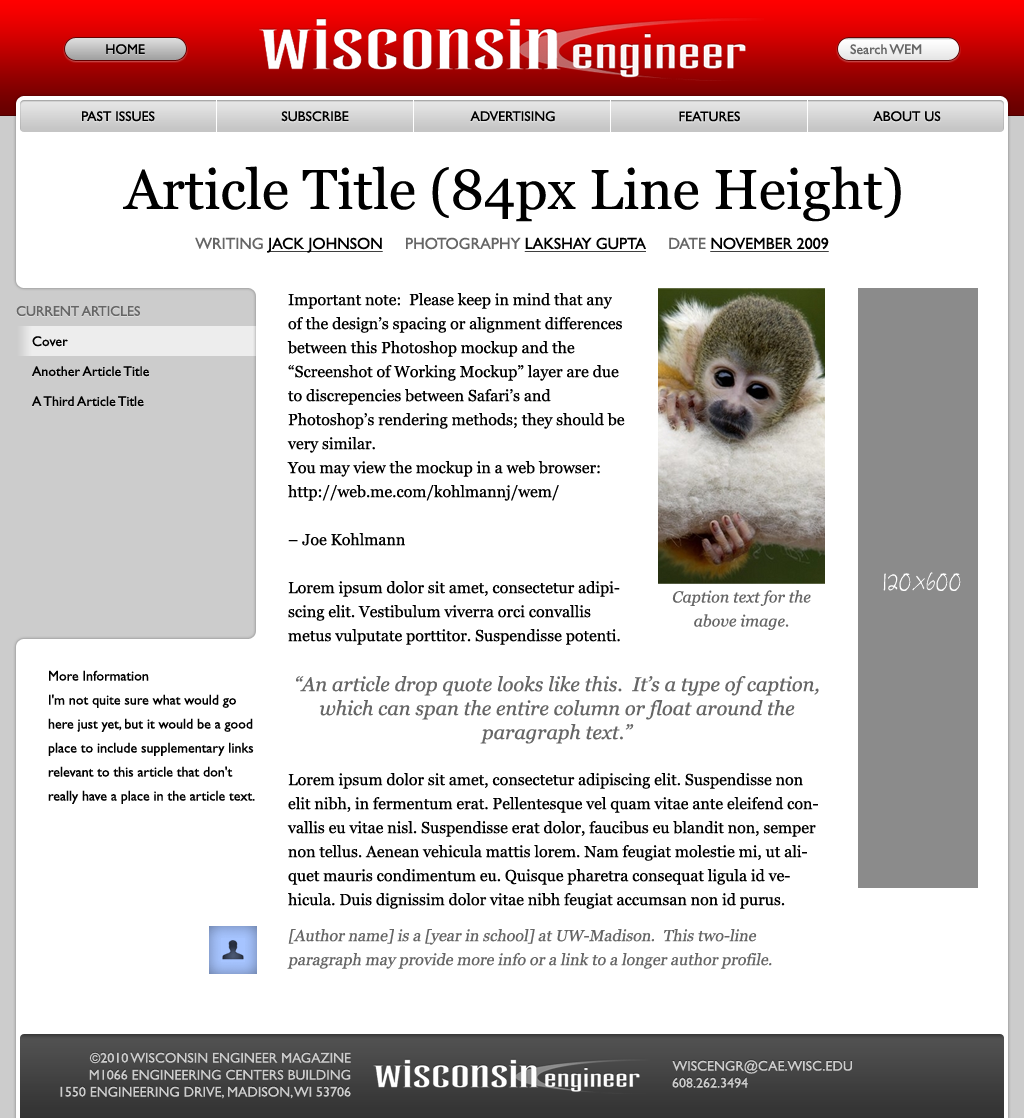
<style>
.page{position:relative;width:1024px;height:1118px;background:#ffffff}
.page>*{position:absolute;margin:0}
.t1{font:14px "GillSans";color:#000000;text-transform:uppercase}
.t2{font:14px "GillSans";color:#666666}
.t3{font:56px "Georgia";color:#000000}
.t4{font:16px "GillSans";color:#000000;text-transform:uppercase;text-decoration:underline}
.t5{font:16px "GillSans";color:#666666;text-transform:uppercase}
.t6{font:16px/24px "Georgia";color:#000000}
.t7{font:14px "GillSans";color:#666666;text-transform:uppercase}
.t8{font:14px "GillSans";color:#000000}
.t9{font:16px/24px "Georgia-Italic";color:#666666}
.t10{font:14px/24px "GillSans";color:#000000}
.t11{font:20px/24px "Georgia-Italic";color:#666666}
.t12{font:16px/24px "Georgia";color:#666666;font-style:italic}
.t13{font:14px/17px "GillSans";color:#cccccc;text-transform:uppercase}
.t14{font:14px "GillSans";color:#cccccc;text-transform:uppercase}
</style>
<div class="page">
<p class="t1" style="left:106px;top:44px;width:39px;height:11px">HOME</p>
<p class="t2" style="left:850px;top:44px;width:72px;height:11px">Search WEM</p>
<p class="t1" style="left:82px;top:111px;width:73px;height:11px">Past Issues</p>
<p class="t1" style="left:281px;top:111px;width:68px;height:11px">Subscribe</p>
<p class="t1" style="left:470px;top:111px;width:85px;height:11px">Advertising</p>
<p class="t1" style="left:679px;top:111px;width:61px;height:11px">Features</p>
<p class="t1" style="left:873px;top:111px;width:68px;height:11px">About Us</p>
<p class="t3" style="left:123px;top:166px;width:778px;height:56px">Article Title (84px Line Height)</p>
<p class="t4" style="left:195px;top:237px;width:634px;height:16px"><span class="t5">Writing </span>Jack Johnson     <span class="t5">Photography </span>Lakshay Gupta<span class="t5">     Date </span>November 2009</p>
<p class="t6" style="left:287px;top:293px;width:338px;height:352px">Important note:  Please keep in mind that any of the design’s spacing or alignment differences between this Photoshop mockup and the “Screenshot of Working Mockup” layer are due to discrepencies between Safari’s and Photoshop’s rendering methods; they should be very similar.<br>You may view the mockup in a web browser:<br>http://web.me.com/kohlmannj/wem/<br><br>– Joe Kohlmann<br><br>Lorem ipsum dolor sit amet, consectetur adipiscing elit. Vestibulum viverra orci convallis metus vulputate porttitor. Suspendisse potenti.</p>
<p class="t7" style="left:16px;top:306px;width:124px;height:10px">Current Articles</p>
<p class="t8" style="left:32px;top:336px;width:36px;height:11px">Cover</p>
<p class="t8" style="left:32px;top:366px;width:117px;height:11px">Another Article Title</p>
<p class="t8" style="left:32px;top:396px;width:112px;height:11px">A Third Article Title</p>
<p class="t9" style="left:672px;top:590px;width:139px;height:40px;text-align:center">Caption text for the above image.</p>
<p class="t10" style="left:48px;top:670px;width:207px;height:134px">More Information<br>I'm not quite sure what would go here just yet, but it would be a good place to include supplementary links relevant to this article that don't really have a place in the article text.</p>
<p class="t11" style="left:296px;top:676px;width:523px;height:68px;text-align:center">“An article drop quote looks like this.  It’s a type of caption, which can span the entire column or float around the paragraph text.”</p>
<p class="t6" style="left:287px;top:773px;width:531px;height:136px">Lorem ipsum dolor sit amet, consectetur adipiscing elit. Suspendisse non elit nibh, in fermentum erat. Pellentesque vel quam vitae ante eleifend convallis eu vitae nisl. Suspendisse erat dolor, faucibus eu blandit non, semper non tellus. Aenean vehicula mattis lorem. Nam feugiat molestie mi, ut aliquet mauris condimentum eu. Quisque pharetra consequat ligula id vehicula. Duis dignissim dolor vitae nibh feugiat accumsan non id purus.</p>
<p class="t12" style="left:287px;top:929px;width:485px;height:40px">[Author name] is a [year in school] at UW-Madison.  This two-line paragraph may provide more info or a link to a longer author profile.</p>
<p class="t13" style="left:60px;top:1052px;width:291px;height:47px;text-align:right">©2010 Wisconsin Engineer Magazine<br>M1066 Engineering Centers Building<br>1550 Engineering Drive, Madison, WI 53706</p>
<p class="t14" style="left:672px;top:1060px;width:180px;height:14px">wiscengr@cae.wisc.edu</p>
<p class="t14" style="left:672px;top:1077px;width:76px;height:11px">608.262.3494</p>
</div>
